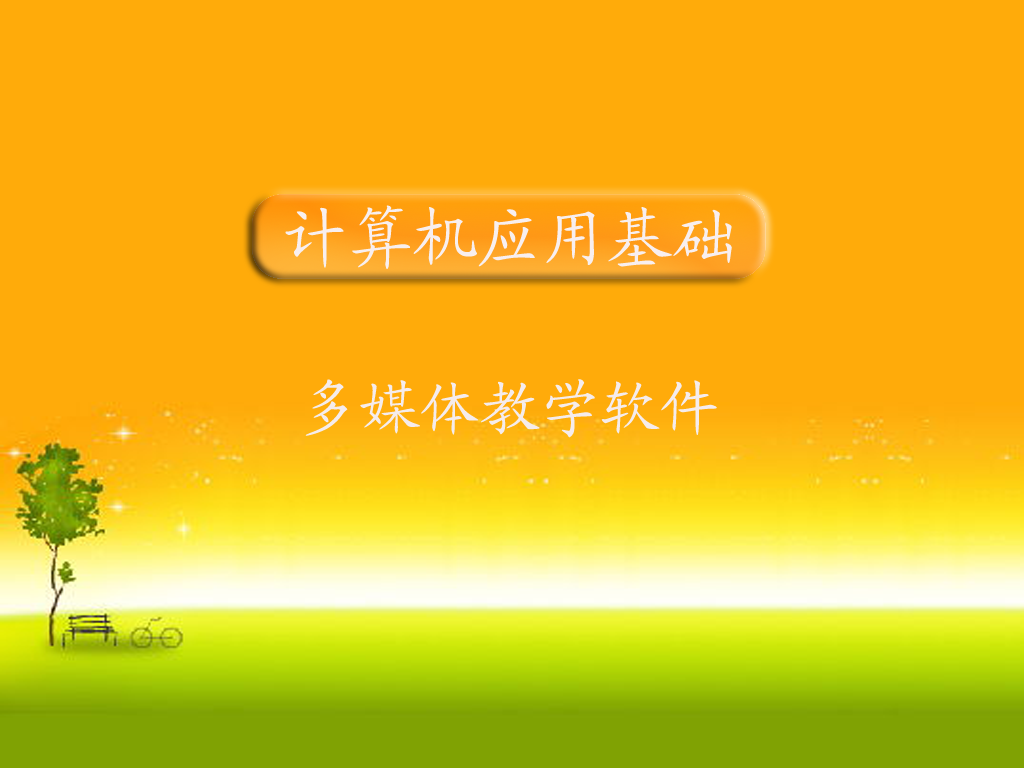
<style>
.page{position:relative;width:1024px;height:768px;background:#ffab0a}
.page>*{position:absolute;margin:0}
.t1{font:65px "KaiTi_GB2312";color:#f8efef}
.t2{font:60px "KaiTi_GB2312";color:#f5ecec}
</style>
<div class="page">
<p class="t1" style="left:285px;top:205px;width:447px;height:64px">计算机应用基础</p>
<p class="t2" style="left:305px;top:379px;width:412px;height:59px">多媒体教学软件</p>
</div>
